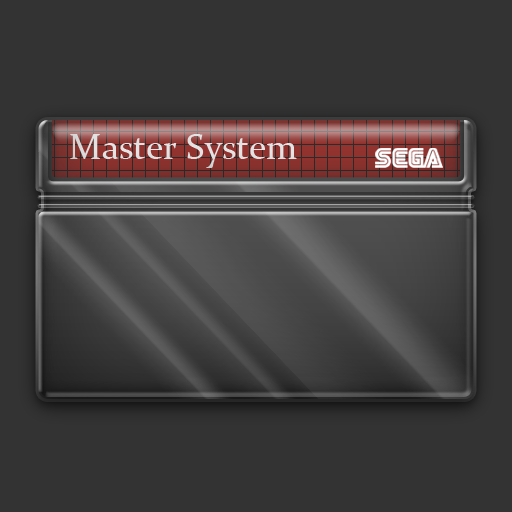
<style>
.page{position:relative;width:512px;height:512px;background:#333333}
.page>*{position:absolute;margin:0}
.t1{font:36px "Constantia";color:#e2e2e2}
</style>
<div class="page">
<p class="t1" style="left:70px;top:134px;width:227px;height:34px">Master System</p>
</div>
